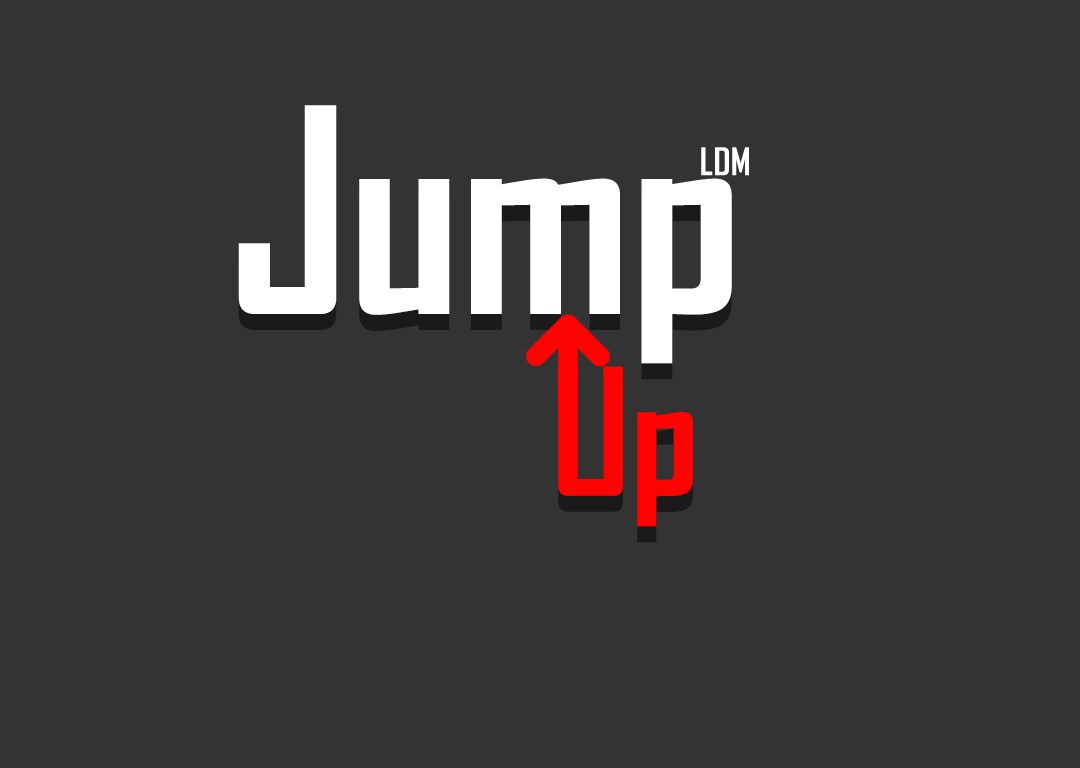
<style>
.page{position:relative;width:1080px;height:768px;background:#333333}
.page>*{position:absolute;margin:0}
.t1{font:273px "AgencyFB-Bold";color:#ffffff}
.t2{font:36.8px "AgencyFB-Bold";color:#ffffff}
.t3{font:168.8px "AgencyFB-Bold";color:#ff0202}
</style>
<div class="page">
<p class="t1" style="left:238px;top:105px;width:494px;height:259px">Jump</p>
<p class="t2" style="left:701px;top:147px;width:48px;height:29px">LDM</p>
<p class="t3" style="left:558px;top:366px;width:135px;height:161px">Up</p>
</div>
